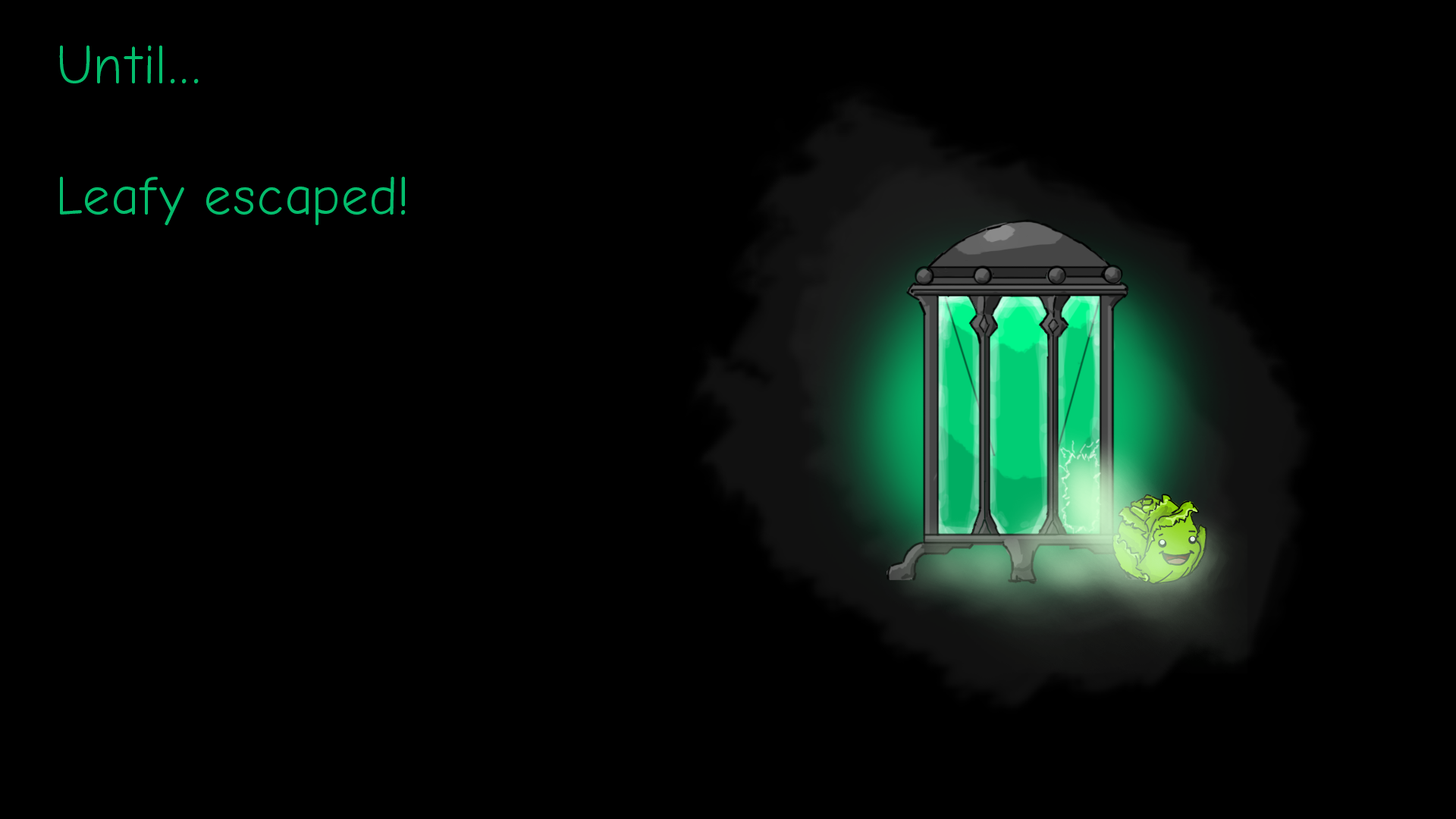
<style>
.page{position:relative;width:1456px;height:819px;background:#000000}
.page>*{position:absolute;margin:0}
.t1{font:54.6px "ComicNeue";color:#04bd6d}
</style>
<div class="page">
<p class="t1" style="left:59px;top:45px;width:347px;height:180px">Until...<br><br>Leafy escaped!</p>
</div>
